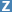
<style>
.page{position:relative;width:12px;height:12px;background:#4682b4}
.page>*{position:absolute;margin:0}
.t1{font:14.6px "MyriadPro-Bold";color:#ffffff}
</style>
<div class="page">
<p class="t1" style="left:2px;top:1px;width:8px;height:10px">Z</p>
</div>
